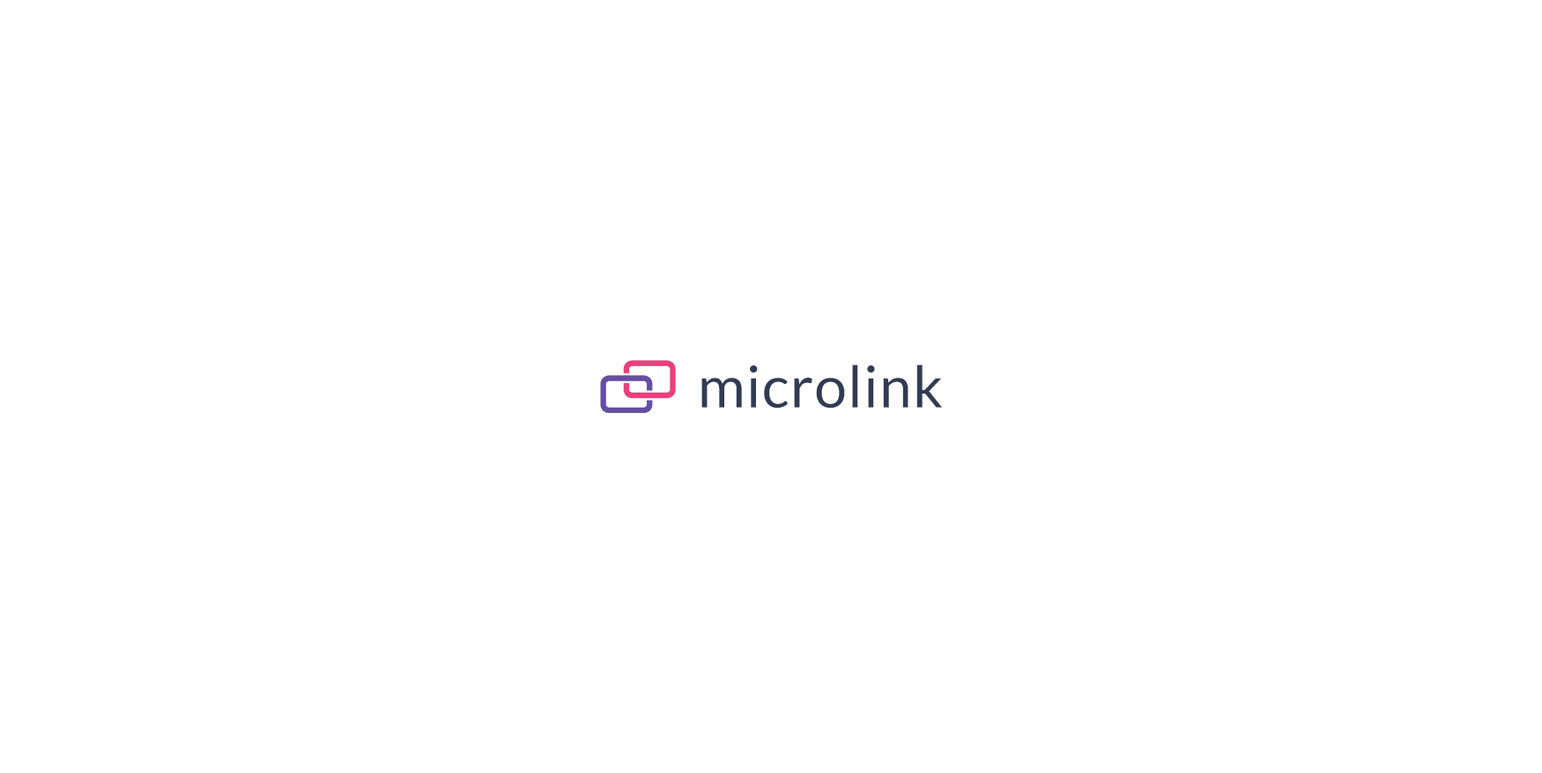
<style>
.page{position:relative;width:1542px;height:773px;background:#ffffff}
.page>*{position:absolute;margin:0}
.t1{font:57.7px "Lato-Regular";letter-spacing:0.018em;color:#313b53}
</style>
<div class="page">
<p class="t1" style="left:701px;top:365px;width:241px;height:44px">microlink</p>
</div>
